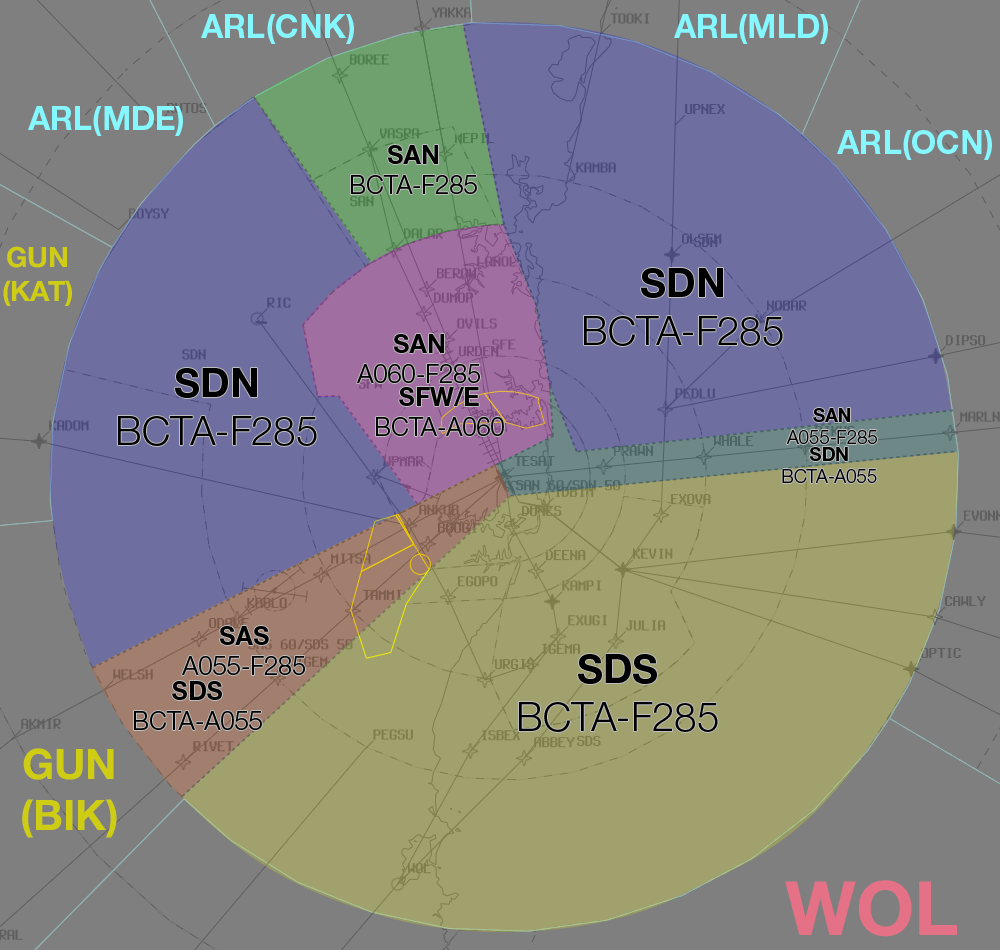
<style>
.page{position:relative;width:1000px;height:950px;background:#7f7f7f}
.page>*{position:absolute;margin:0}
.t1{font:32.2px "HelveticaNeueLTStd-Bd";color:#85f8ff}
.t2{font:25.3px "HelveticaNeueLTStd-Lt";color:#000000}
.t3{font:25.3px "HelveticaNeueLTStd-Bd";color:#000000}
.t4{font:28px "HelveticaNeue-Bold";color:#cecc13}
.t5{font:28px "MyriadPro-Regular";color:#cecc13}
.t6{font:40px "HelveticaNeueLTStd-Lt";color:#000000}
.t7{font:40px "HelveticaNeueLTStd-Bd";color:#000000}
.t8{font:18.6px "HelveticaNeueLTStd-Lt";color:#000000}
.t9{font:18.6px "HelveticaNeueLTStd-Bd";color:#000000}
.t10{font:42.2px "HelveticaNeue-Bold";color:#cecc13}
.t11{font:42.2px "MyriadPro-Regular";color:#cecc13}
.t12{font:75px "HelveticaNeue-Bold";color:#e57187}
</style>
<div class="page">
<p class="t1" style="left:201px;top:14px;width:153px;height:30px">ARL(CNK)</p>
<p class="t1" style="left:674px;top:14px;width:154px;height:30px">ARL(MLD)</p>
<p class="t1" style="left:28px;top:106px;width:155px;height:30px">ARL(MDE)</p>
<p class="t1" style="left:837px;top:130px;width:155px;height:30px">ARL(OCN)</p>
<p class="t2" style="left:351px;top:145px;width:126px;height:49px;text-align:center"><span class="t3">SAN<br></span>BCTA-F285</p>
<p class="t4" style="left:3px;top:246px;width:69px;height:60px;text-align:center">GUN<span class="t5"><br></span>(KAT)</p>
<p class="t6" style="left:584px;top:268px;width:199px;height:78px;text-align:center"><span class="t7">SDN<br></span>BCTA-F285</p>
<p class="t2" style="left:357px;top:334px;width:123px;height:49px;text-align:center"><span class="t3">SAN<br></span>A060-F285</p>
<p class="t6" style="left:118px;top:368px;width:199px;height:78px;text-align:center"><span class="t7">SDN<br></span>BCTA-F285</p>
<p class="t2" style="left:376px;top:387px;width:128px;height:49px;text-align:center"><span class="t3">SFW/E<br></span>BCTA-A060</p>
<p class="t8" style="left:786px;top:408px;width:91px;height:36px;text-align:center"><span class="t9">SAN<br></span>A055-F285</p>
<p class="t8" style="left:782px;top:447px;width:95px;height:36px;text-align:center"><span class="t9">SDN<br></span>BCTA-A055</p>
<p class="t2" style="left:182px;top:626px;width:123px;height:49px;text-align:center"><span class="t3">SAS<br></span>A055-F285</p>
<p class="t6" style="left:519px;top:654px;width:199px;height:78px;text-align:center"><span class="t7">SDS<br></span>BCTA-F285</p>
<p class="t2" style="left:134px;top:681px;width:128px;height:49px;text-align:center"><span class="t3">SDS<br></span>BCTA-A055</p>
<p class="t10" style="left:22px;top:748px;width:95px;height:90px;text-align:center">GUN<span class="t11"><br></span>(BIK)</p>
<p class="t12" style="left:785px;top:880px;width:172px;height:57px">WOL</p>
</div>
